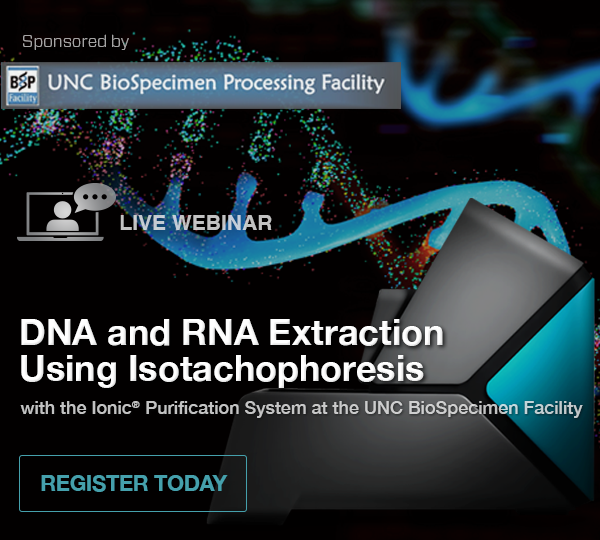
<style>
.page{position:relative;width:600px;height:540px;background:#020000}
.page>*{position:absolute;margin:0}
.t1{font:16.5px "Forza-Light";color:#a5a4a4}
.t2{font:21.1px "Helvetica-Bold";color:#c2c2c2;text-transform:uppercase}
.t3{font:36px/36px "HelveticaNeue-Bold";color:#fefefe}
.t4{font:18px "HelveticaNeue-Medium";color:#c2c5c6}
.t5{font:21.6px "HelveticaNeue-Bold";letter-spacing:-0.01em;color:#45a0ac;text-transform:uppercase}
</style>
<div class="page">
<p class="t1" style="left:23px;top:34px;width:106px;height:16px">Sponsored by</p>
<p class="t2" style="left:120px;top:215px;width:152px;height:15px">Live Webinar</p>
<p class="t3" style="left:21px;top:319px;width:422px;height:69px">DNA and RNA Extraction<br>Using Isotachophoresis</p>
<p class="t4" style="left:20px;top:401px;width:563px;height:17px">with the Ionic® Purification System at the UNC BioSpecimen Facility</p>
<p class="t5" style="left:41px;top:475px;width:187px;height:17px">Register Today</p>
</div>
